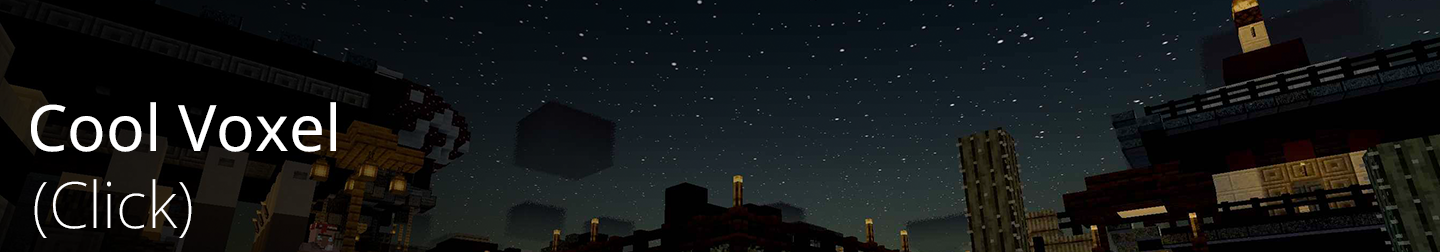
<style>
.page{position:relative;width:1440px;height:252px}
.page>*{position:absolute;margin:0}
.t1{font:64px "NotoSans-Regular";color:#ffffff}
.t2{font:64px "NotoSans-ExtraLight";color:#ffffff}
</style>
<div class="page">
<p class="t1" style="left:31px;top:102px;width:305px;height:50px">Cool Voxel</p>
<p class="t2" style="left:34px;top:179px;width:158px;height:59px">(Click)</p>
</div>
